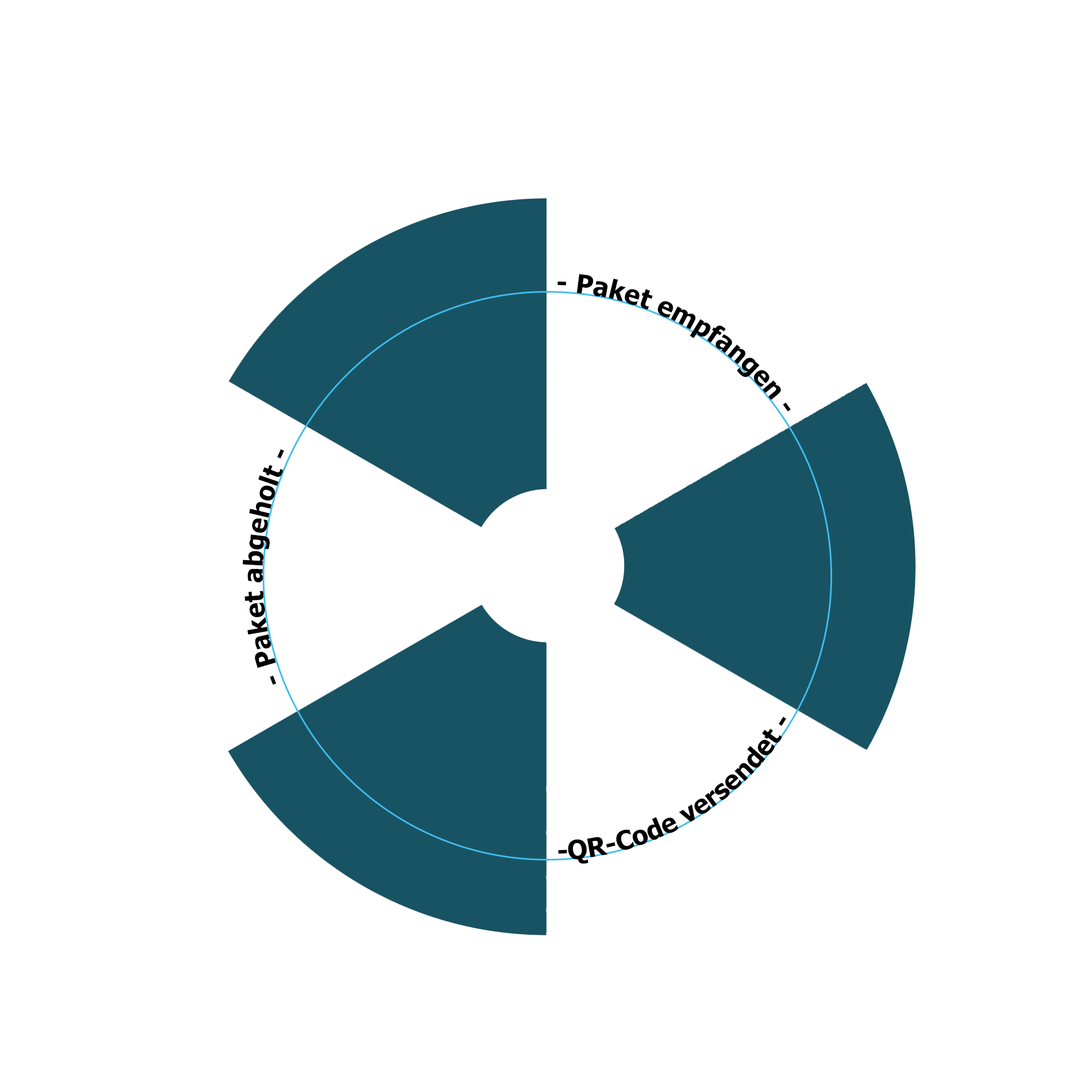
<style>
.page{position:relative;width:1092px;height:1092px;background:#ffffff}
.page>*{position:absolute;margin:0}
.t1{font:26.2px "Tahoma-Bold";color:#000000}
</style>
<div class="page">
<p class="t1" style="left:557px;top:274px;width:234px;height:138px">- Paket empfangen -</p>
<p class="t1" style="left:242px;top:449px;width:42px;height:236px">- Paket abgeholt -</p>
<p class="t1" style="left:558px;top:716px;width:228px;height:148px">-QR-Code versendet -</p>
</div>
